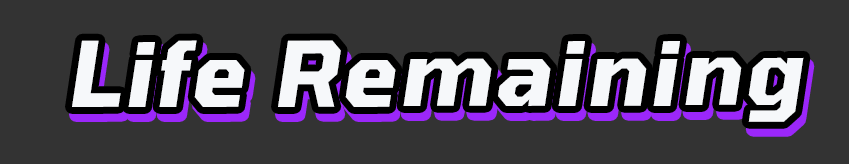
<style>
.page{position:relative;width:849px;height:164px;background:#333333}
.page>*{position:absolute;margin:0}
.t1{font:89.9px "Tomorrow-BoldItalic";letter-spacing:0.04em;color:#f6f8fa}
</style>
<div class="page">
<p class="t1" style="left:72px;top:40px;width:732px;height:82px">Life Remaining</p>
</div>
